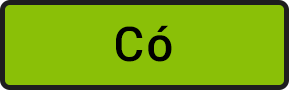
<style>
.page{position:relative;width:289px;height:90px;background:#8ac007}
.page>*{position:absolute;margin:0}
.t1{font:48px "Roboto-Medium";letter-spacing:0.05em;color:#000000}
</style>
<div class="page">
<p class="t1" style="left:116px;top:25px;width:56px;height:37px">Có</p>
</div>
